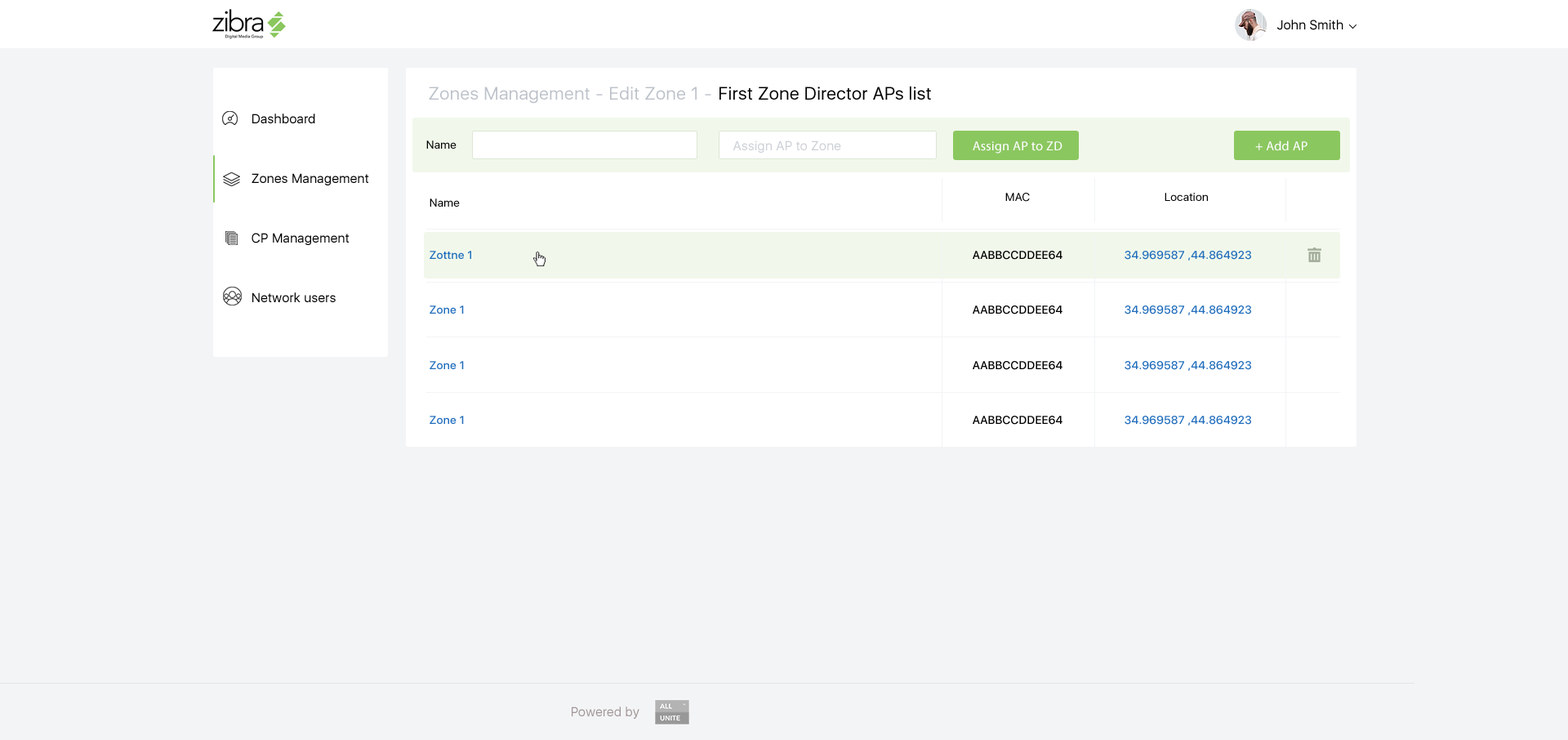
<style>
.page{position:relative;width:1568px;height:740px;background:#f3f4f6}
.page>*{position:absolute;margin:0}
.t1{font:13.1px "SFUIDisplay-Regular";letter-spacing:0.02em;color:#000000}
.t2{font:18px "SFUIDisplay-Regular";letter-spacing:0.02em;color:#bdc2ca}
.t3{font:18px "SFUIDisplay-Regular";letter-spacing:0.02em;color:#000000}
.t4{font:13.1px/59.6px "SFUIDisplay-Regular";letter-spacing:0.02em;color:#000000}
.t5{font:11.4px "SFUIDisplay-Regular";letter-spacing:0.02em;color:#000000}
.t6{font:13.1px "SFUIDisplay-Regular";letter-spacing:0.02em;color:#cbcfd5}
.t7{font:13.1px "MyriadPro-Regular";letter-spacing:0.02em;color:#ffffff}
.t8{font:11.4px "SFUIDisplay-Medium";letter-spacing:0.02em;color:#206dbc}
.t9{font:11.4px "SFUIDisplay-Medium";letter-spacing:0.02em;color:#000000}
.t10{font:13.1px "SFUIDisplay-Regular";letter-spacing:0.02em;color:#a19696}
</style>
<div class="page">
<p class="t1" style="left:1277px;top:20px;width:66px;height:10px">John Smith</p>
<p class="t2" style="left:429px;top:87px;width:174px;height:17px"><span class="t3"> </span>- Zones Management</p>
<p class="t2" style="left:610px;top:87px;width:101px;height:13px">- Edit Zone 1</p>
<p class="t3" style="left:719px;top:86px;width:212px;height:14px">First Zone Director APs list</p>
<p class="t4" style="left:252px;top:114px;width:117px;height:188px;text-align:right">Dashboard<br>Zones Management<br>CP Management<br>Network users</p>
<p class="t5" style="left:426px;top:140px;width:31px;height:9px">Name</p>
<p class="t6" style="left:733px;top:140px;width:108px;height:13px">Assign AP to Zone</p>
<p class="t7" style="left:973px;top:141px;width:89px;height:13px">Assign AP to ZD</p>
<p class="t7" style="left:1255px;top:140px;width:52px;height:11px">Add AP +</p>
<p class="t5" style="left:1005px;top:193px;width:25px;height:9px">MAC</p>
<p class="t5" style="left:1165px;top:193px;width:43px;height:8px">Location</p>
<p class="t5" style="left:430px;top:198px;width:30px;height:9px">Name</p>
<p class="t8" style="left:430px;top:251px;width:41px;height:8px">Zottne 1</p>
<p class="t9" style="left:973px;top:251px;width:89px;height:9px">AABBCCDDEE64</p>
<p class="t8" style="left:1125px;top:251px;width:126px;height:10px">44.864923, 34.969587</p>
<p class="t8" style="left:430px;top:305px;width:34px;height:9px">Zone 1</p>
<p class="t9" style="left:973px;top:305px;width:89px;height:9px">AABBCCDDEE64</p>
<p class="t8" style="left:1125px;top:305px;width:126px;height:10px">44.864923, 34.969587</p>
<p class="t8" style="left:430px;top:361px;width:34px;height:8px">Zone 1</p>
<p class="t9" style="left:973px;top:361px;width:89px;height:9px">AABBCCDDEE64</p>
<p class="t8" style="left:1125px;top:361px;width:126px;height:10px">44.864923, 34.969587</p>
<p class="t8" style="left:430px;top:416px;width:34px;height:8px">Zone 1</p>
<p class="t9" style="left:973px;top:416px;width:89px;height:9px">AABBCCDDEE64</p>
<p class="t8" style="left:1125px;top:416px;width:126px;height:9px">44.864923, 34.969587</p>
<p class="t10" style="left:572px;top:706px;width:67px;height:13px">Powered by</p>
</div>
